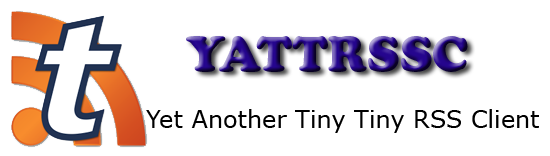
<style>
.page{position:relative;width:550px;height:156px;background:#ffffff}
.page>*{position:absolute;margin:0}
.t1{font:48px "CooperBlackStd"}
.t2{font:24px "Verdana";color:#000000}
</style>
<div class="page">
<p class="t1" style="left:186px;top:36px;width:282px;height:36px">YATTRSSC</p>
<p class="t2" style="left:146px;top:109px;width:393px;height:24px">Yet Another Tiny Tiny RSS Client</p>
</div>
